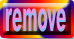
<style>
.page{position:relative;width:74px;height:39px}
.page>*{position:absolute;margin:0}
.t1{font:43px "Arial-Black";scale:0.36 1}
</style>
<div class="page">
<p class="t1" style="left:6px;top:8px;width:60px;height:24px">remove</p>
</div>
